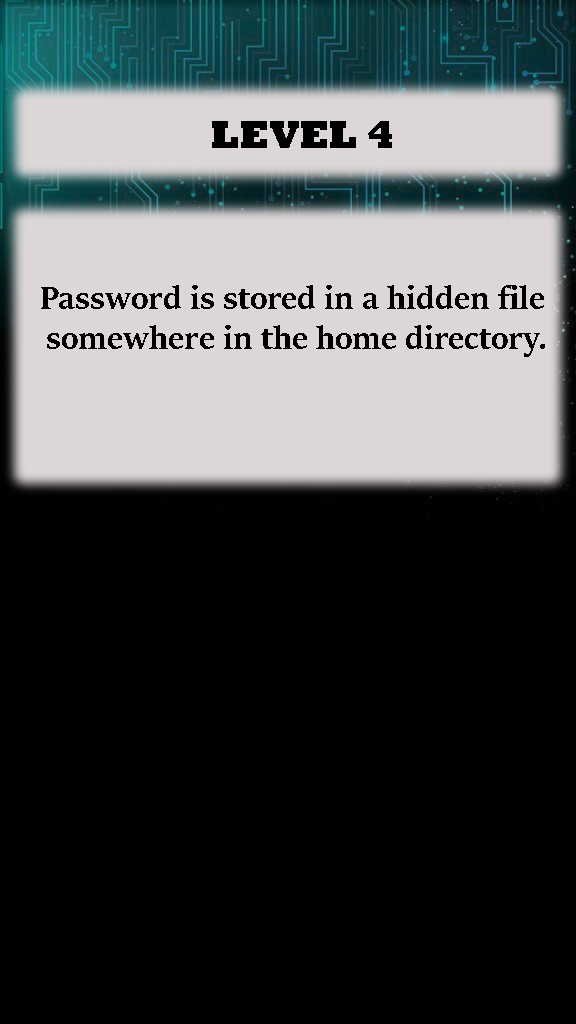
<style>
.page{position:relative;width:576px;height:1024px;background:#000000}
.page>*{position:absolute;margin:0}
.t1{font:40px "Rockwell-ExtraBold";color:#000000}
.t2{font:36px/10px "SitkaBanner-Bold";color:#000000}
</style>
<div class="page">
<p class="t1" style="left:212px;top:121px;width:180px;height:27px">LEVEL 4</p>
<p class="t2" style="left:41px;top:285px;width:504px;height:72px;text-align:center">Password is stored in a hidden file<br><br><br><br> somewhere in the home directory.</p>
</div>
